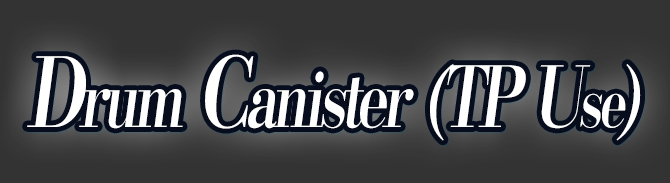
<style>
.page{position:relative;width:670px;height:183px;background:#333333}
.page>*{position:absolute;margin:0}
.t1{font:76.8px "KochoStd-Heavy";letter-spacing:-0.08em;color:#ffffff;font-style:italic;scale:0.75 1}
.t2{font:96px "KochoStd-Heavy";letter-spacing:-0.08em;color:#ffffff;font-style:italic;scale:0.75 1}
.t3{font:84px "KochoStd-Heavy";letter-spacing:-0.08em;color:#ffffff;font-style:italic;scale:0.75 1}
.t4{font:67.2px "KochoStd-Heavy";letter-spacing:-0.08em;color:#ffffff;font-style:italic;scale:0.75 1}
</style>
<div class="page">
<p class="t1" style="left:27px;top:54px;width:614px;height:87px"><span class="t2">D</span>rum<span class="t2"> C</span>anister <span class="t3">(TP U</span><span class="t4">se</span><span class="t3">)</span></p>
</div>
